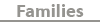
<style>
.page{position:relative;width:100px;height:22px;background:#ffffff}
.page>*{position:absolute;margin:0}
.t1{font:18px "Myriad-BdWeb";color:#959490}
</style>
<div class="page">
<p class="t1" style="left:17px;top:4px;width:67px;height:13px">Families</p>
</div>
